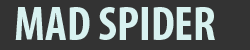
<style>
.page{position:relative;width:250px;height:50px;background:#333333}
.page>*{position:absolute;margin:0}
.t1{font:48px "MyriadPro-BoldCond";color:#d8f2f0}
</style>
<div class="page">
<p class="t1" style="left:15px;top:7px;width:200px;height:33px">MAD SPIDER</p>
</div>
